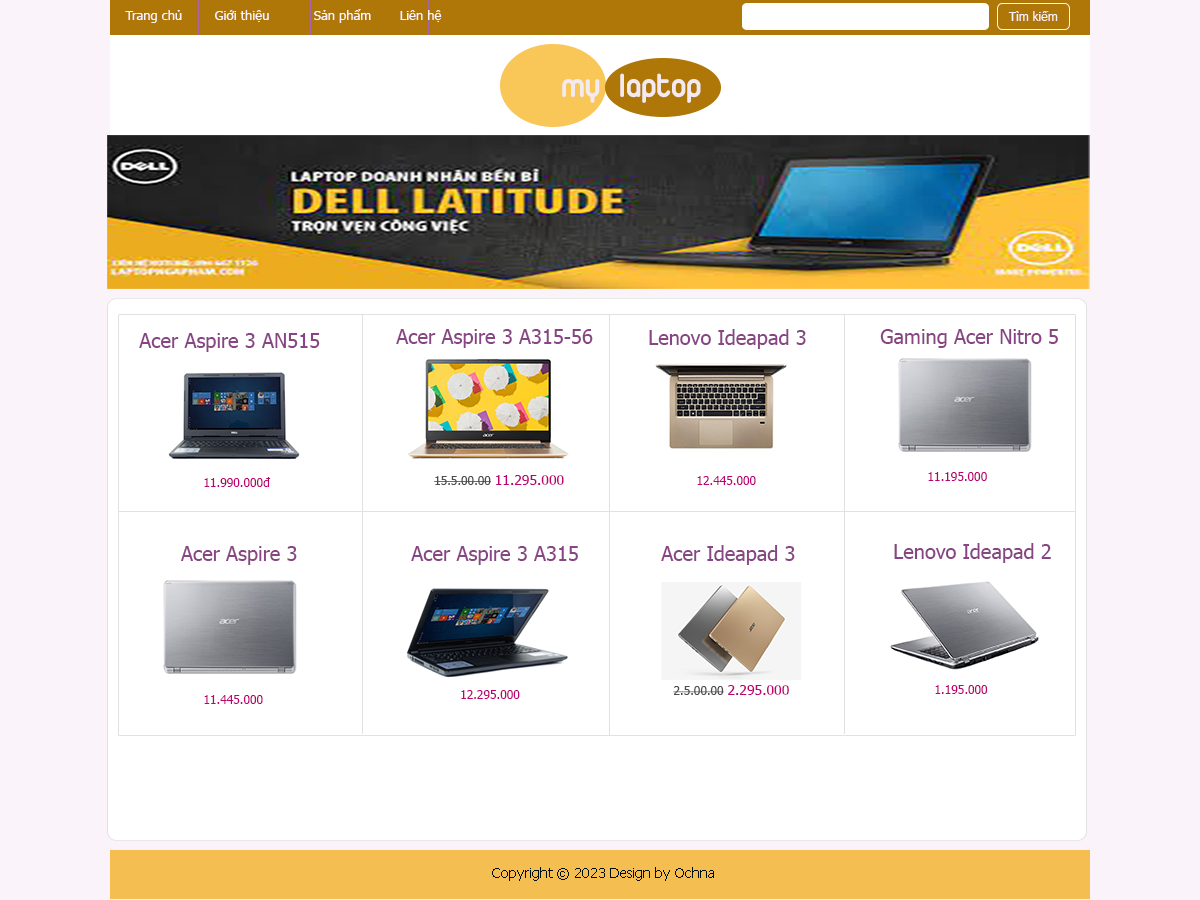
<style>
.page{position:relative;width:1200px;height:900px;background:#ffffff}
.page>*{position:absolute;margin:0}
.t1{font:13px "Tahoma";color:#faf4fa}
.t2{font:12px "Tahoma";color:#faf4fa}
.t3{font:36px "UTMDuepuntozeroBold";color:#f3eaef}
.t4{font:20px "Tahoma";color:#884583}
.t5{font:12px "Tahoma";color:#bc0374}
.t6{font:12px "Tahoma";color:#4f4c4e}
.t7{font:14px "Tahoma";color:#bc0374}
.t8{font:14px "Tahoma";color:#010e0e}
</style>
<div class="page">
<p class="t1" style="left:125px;top:9px;width:317px;height:14px">Trang chủ        Giới thiệu           Sản phẩm       Liên hệ</p>
<p class="t2" style="left:1008px;top:11px;width:50px;height:10px">Tìm kiếm</p>
<p class="t3" style="left:562px;top:73px;width:139px;height:30px">my  laptop</p>
<p class="t4" style="left:396px;top:329px;width:197px;height:19px">Acer Aspire 3 A315-56</p>
<p class="t4" style="left:649px;top:329px;width:157px;height:20px">Lenovo Ideapad 3</p>
<p class="t4" style="left:880px;top:329px;width:178px;height:19px">Gaming Acer Nitro 5</p>
<p class="t4" style="left:139px;top:333px;width:181px;height:19px">Acer Aspire 3 AN515</p>
<p class="t5" style="left:928px;top:472px;width:59px;height:9px">11.195.000</p>
<p class="t5" style="left:204px;top:477px;width:67px;height:10px">11.990.000đ</p>
<p class="t6" style="left:434px;top:475px;width:130px;height:10px">15.5.00.00 <span class="t7">11.295.000</span></p>
<p class="t5" style="left:697px;top:476px;width:59px;height:9px">12.445.000</p>
<p class="t4" style="left:661px;top:545px;width:134px;height:20px">Acer Ideapad 3</p>
<p class="t4" style="left:894px;top:543px;width:157px;height:20px">Lenovo Ideapad 2</p>
<p class="t4" style="left:181px;top:546px;width:116px;height:19px">Acer Aspire 3</p>
<p class="t4" style="left:411px;top:546px;width:167px;height:19px">Acer Aspire 3 A315</p>
<p class="t6" style="left:673px;top:685px;width:116px;height:10px">2.5.00.00 <span class="t7">2.295.000</span></p>
<p class="t5" style="left:935px;top:685px;width:53px;height:9px">1.195.000</p>
<p class="t5" style="left:204px;top:695px;width:59px;height:9px">11.445.000</p>
<p class="t5" style="left:461px;top:690px;width:59px;height:9px">12.295.000</p>
<p class="t8" style="left:492px;top:867px;width:222px;height:14px">Copyright © 2023 Design by Ochna</p>
</div>
